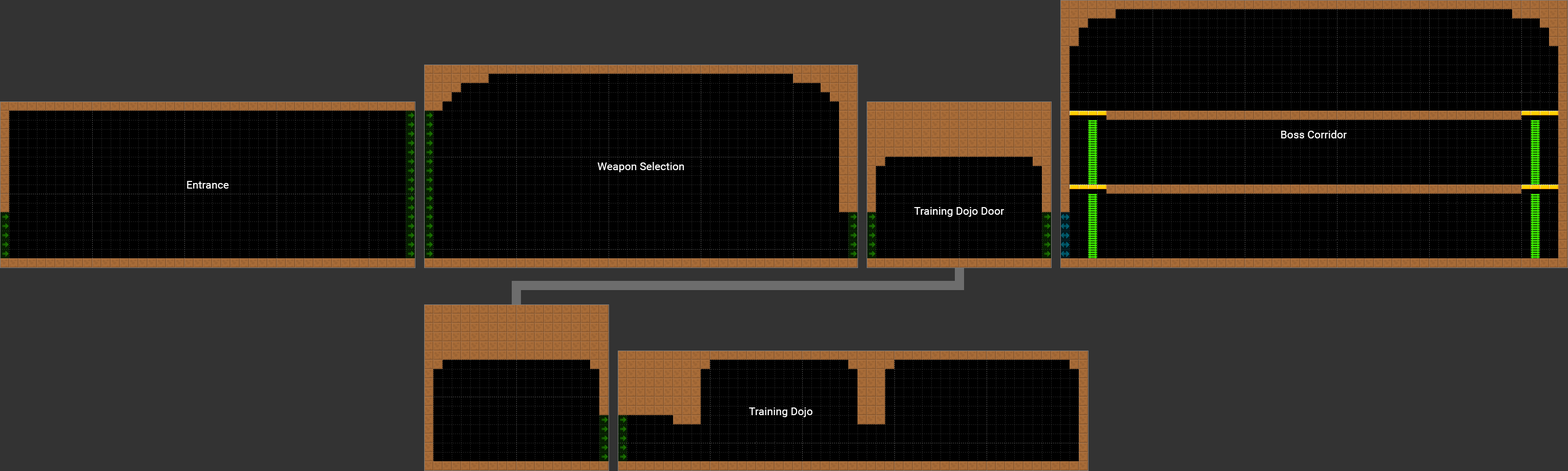
<style>
.page{position:relative;width:1568px;height:471px;background:#333333}
.page>*{position:absolute;margin:0}
.t1{font:10.9px "Roboto-Regular";color:#ffffff}
</style>
<div class="page">
<p class="t1" style="left:1281px;top:130px;width:66px;height:8px">Boss Corridor</p>
<p class="t1" style="left:597px;top:162px;width:87px;height:10px">Weapon Selection</p>
<p class="t1" style="left:187px;top:181px;width:42px;height:8px">Entrance</p>
<p class="t1" style="left:914px;top:207px;width:90px;height:10px">Training Dojo Door</p>
<p class="t1" style="left:749px;top:407px;width:63px;height:10px">Training Dojo</p>
</div>
